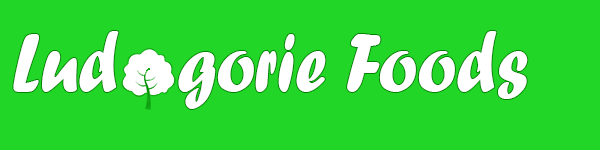
<style>
.page{position:relative;width:600px;height:150px;background:#22d627}
.page>*{position:absolute;margin:0}
.t1{font:86.4px "ForteMT";color:#ffffff;scale:0.83 1}
</style>
<div class="page">
<p class="t1" style="left:13px;top:31px;width:515px;height:78px">Lud   gorie Foods</p>
</div>
